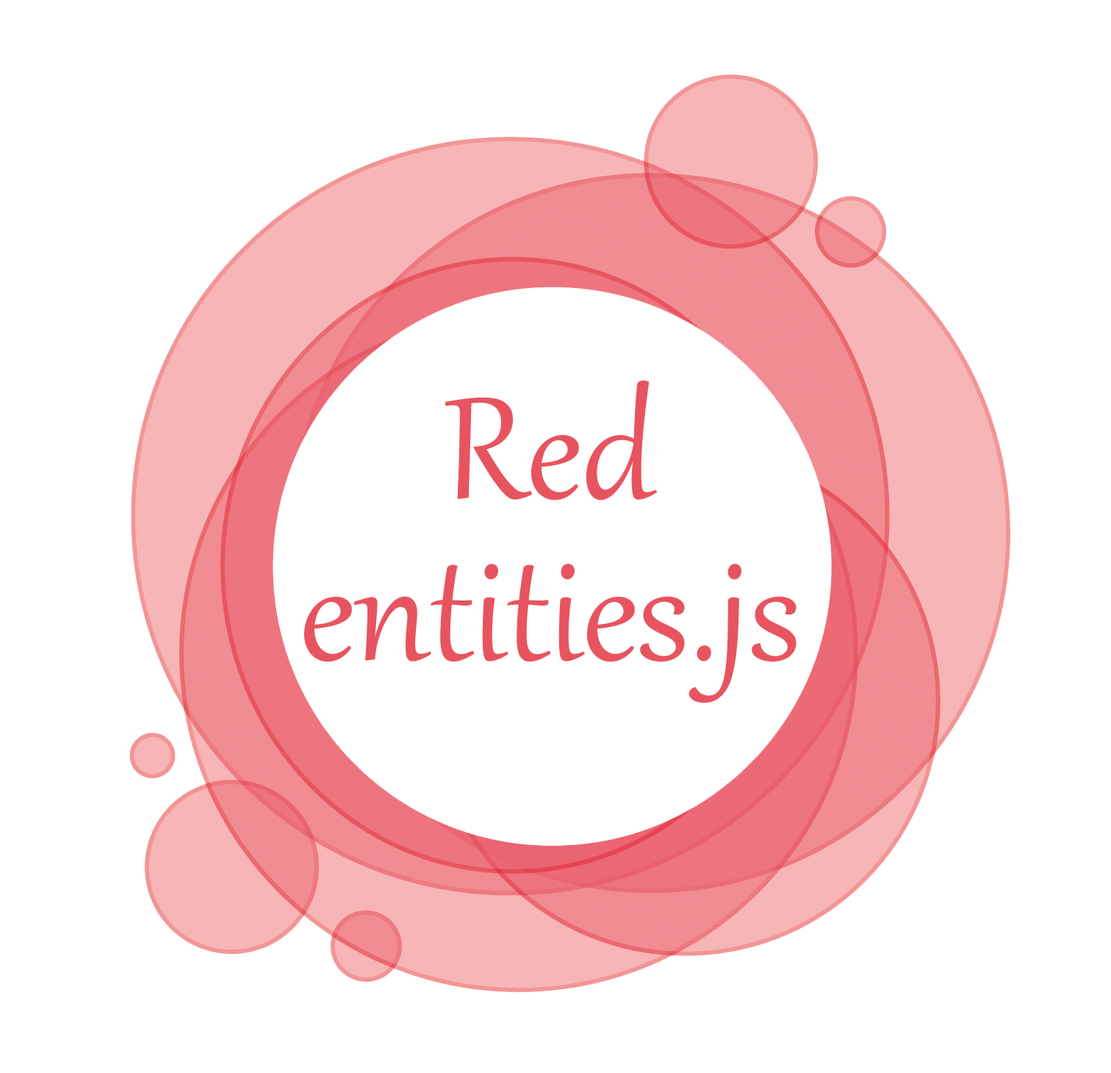
<style>
.page{position:relative;width:1111px;height:1073px;background:#ffffff}
.page>*{position:absolute;margin:0}
.t1{font:176.4px/161.7px "Gabriola";color:#e7545f}
</style>
<div class="page">
<p class="t1" style="left:304px;top:380px;width:493px;height:323px;text-align:center">Red<br>entities.js</p>
</div>
